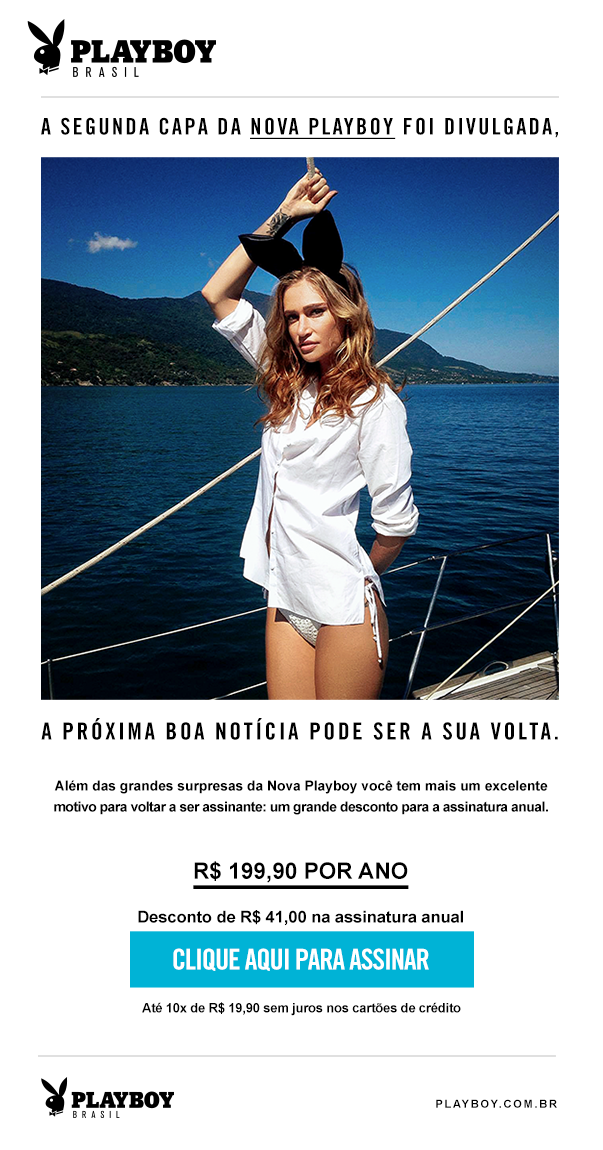
<style>
.page{position:relative;width:603px;height:1150px;background:#ffffff}
.page>*{position:absolute;margin:0}
.t1{font:23px "TradeGothicLTStd-BdCn20";letter-spacing:0.09em;color:#000000;text-transform:uppercase}
.t2{font:23px "TradeGothicLTStd-BdCn20";letter-spacing:0.09em;color:#000000;text-transform:uppercase;text-decoration:underline}
.t3{font:23.6px "TradeGothicLTStd-BdCn20";letter-spacing:0.11em;color:#000000;text-transform:uppercase}
.t4{font:13.9px/20.9px "Arial-BoldMT";letter-spacing:-0.035em;color:#000000}
.t5{font:13.7px/20.9px "Arial-BoldMT";letter-spacing:0.002em;color:#000000}
.t6{font:16.4px/18.7px "Arial-BoldMT";color:#000000}
.t7{font:22.6px/18.7px "Arial-BoldMT";color:#000000}
.t8{font:47.4px "TradeGothicLTStd-BdCn20";color:#000000;text-transform:uppercase;scale:4.54 1}
.t9{font:28.6px "TradeGothicLTStd-BdCn20";letter-spacing:-0.04em;color:#ffffff;text-transform:uppercase}
.t10{font:13.2px "Arial-BoldMT";letter-spacing:-0.02em;color:#000000}
.t11{font:11px "Arial-BoldMT";letter-spacing:0.16em;color:#000000;text-transform:uppercase}
</style>
<div class="page">
<p class="t1" style="left:41px;top:117px;width:517px;height:22px">A segunda capa da <span class="t2">nova playboy</span> foi divulgada,</p>
<p class="t3" style="left:41px;top:718px;width:517px;height:22px">a próxima boa notícia pode ser a sua volta.</p>
<p class="t4" style="left:54px;top:780px;width:494px;height:35px;text-align:center"><span class="t5">Além das grandes surpresas da Nova Playboy você tem mais um excelente<br></span>motivo para voltar a ser assinante: um grande desconto para a assinatura anual.</p>
<p class="t6" style="left:138px;top:861px;width:325px;height:65px;text-align:center"><span class="t7">R$ 199,90 POR ANO<br><br><br></span>Desconto de R$ 41,00 na assinatura anual</p>
<p class="t8" style="left:193px;top:885px;width:216px;height:4px">—</p>
<p class="t9" style="left:173px;top:948px;width:256px;height:23px">clique aqui para assinar</p>
<p class="t10" style="left:142px;top:1002px;width:319px;height:14px">Até 10x de R$ 19,90 sem juros nos cartões de crédito</p>
<p class="t11" style="left:436px;top:1099px;width:121px;height:9px">playboy.com.br</p>
</div>
